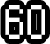
<style>
.page{position:relative;width:50px;height:44px;background:#000000}
.page>*{position:absolute;margin:0}
.t1{font:45.3px "Small Fonts";color:#ffffff}
</style>
<div class="page">
<p class="t1" style="left:5px;top:5px;width:40px;height:34px">60</p>
</div>
